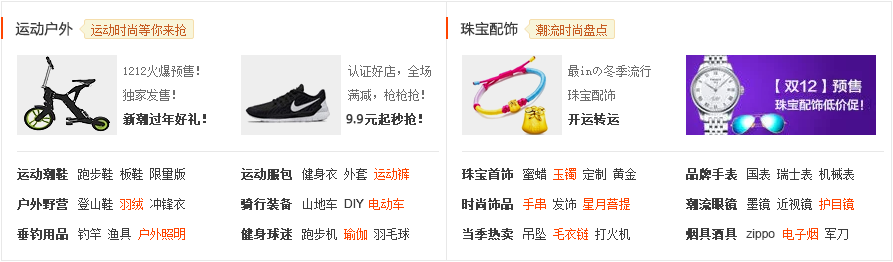
<style>
.page{position:relative;width:893px;height:262px;background:#ffffff}
.page>*{position:absolute;margin:0}
.t1{font:14px "MicrosoftYaHeiLight";color:#3c3c3c;font-weight:bold}
.t2{font:12px "SimSun";color:#c65c22}
.t3{font:12px/24px "SimSun";color:#6c6c6c}
.t4{font:12px "SimSun";color:#3c3c3c;font-weight:bold}
.t5{font:12px "MicrosoftYaHei";color:#3c3c3c;font-weight:bold}
.t6{font:12px/30px "SimSun";color:#3c3c3c;font-weight:bold}
.t7{font:12px/30px "SimSun";color:#3c3c3c}
.t8{font:12px/30px "SimSun";color:#ff4400}
.t9{font:12px/30px "ArialMT";color:#3c3c3c}
.t10{font:12px "ArialMT";color:#3c3c3c}
.t11{font:12px "ArialMT";color:#3f3f3f}
</style>
<div class="page">
<p class="t1" style="left:15px;top:21px;width:58px;height:15px">运动户外</p>
<p class="t2" style="left:91px;top:24px;width:95px;height:12px">运动时尚等你来抢</p>
<p class="t1" style="left:460px;top:21px;width:58px;height:15px">珠宝配饰</p>
<p class="t2" style="left:536px;top:24px;width:71px;height:12px">潮流时尚盘点</p>
<p class="t3" style="left:123px;top:65px;width:76px;height:36px">1212火爆预售！<br>独家发售！</p>
<p class="t3" style="left:348px;top:65px;width:83px;height:36px">认证好店，全场<br>满减，枪枪抢！</p>
<p class="t3" style="left:568px;top:65px;width:83px;height:36px">最inの冬季流行<br>珠宝配饰</p>
<p class="t4" style="left:123px;top:113px;width:83px;height:12px">新潮过年好礼！</p>
<p class="t4" style="left:365px;top:113px;width:57px;height:12px">元起秒抢！</p>
<p class="t4" style="left:568px;top:113px;width:51px;height:12px">开运转运</p>
<p class="t5" style="left:346px;top:114px;width:18px;height:10px">9.9</p>
<p class="t6" style="left:17px;top:168px;width:51px;height:72px">运动潮鞋<br>户外野营<br>垂钓用品</p>
<p class="t7" style="left:78px;top:168px;width:107px;height:72px">跑步鞋 板鞋 限量版<br>登山鞋 <span class="t8">羽绒</span> 冲锋衣<br>钓竿 渔具 <span class="t8">户外照明</span></p>
<p class="t6" style="left:241px;top:168px;width:51px;height:72px">运动服包<br>骑行装备<br>健身球迷</p>
<p class="t7" style="left:302px;top:168px;width:107px;height:72px">健身衣 外套 <span class="t8">运动裤<br></span>山地车 <span class="t9">DIY </span><span class="t8">电动车<br></span>跑步机 <span class="t8">瑜伽</span> 羽毛球</p>
<p class="t6" style="left:462px;top:168px;width:51px;height:72px">珠宝首饰<br>时尚饰品<br>当季热卖</p>
<p class="t7" style="left:523px;top:168px;width:113px;height:72px">蜜蜡 <span class="t8">玉镯</span> 定制 黄金<br><span class="t8">手串</span> 发饰 <span class="t8">星月菩提<br></span>吊坠 <span class="t8">毛衣链</span> 打火机</p>
<p class="t6" style="left:686px;top:168px;width:51px;height:72px">品牌手表<br>潮流眼镜<br>烟具酒具</p>
<p class="t8" style="left:747px;top:168px;width:107px;height:72px"><span class="t7">国表 瑞士表 机械表<br>墨镜 近视镜 </span>护目镜<br>            电子烟<span class="t7"> 军刀</span></p>
<p class="t10" style="left:344px;top:199px;width:20px;height:9px">DIY</p>
<p class="t11" style="left:746px;top:229px;width:29px;height:11px">zippo</p>
</div>
